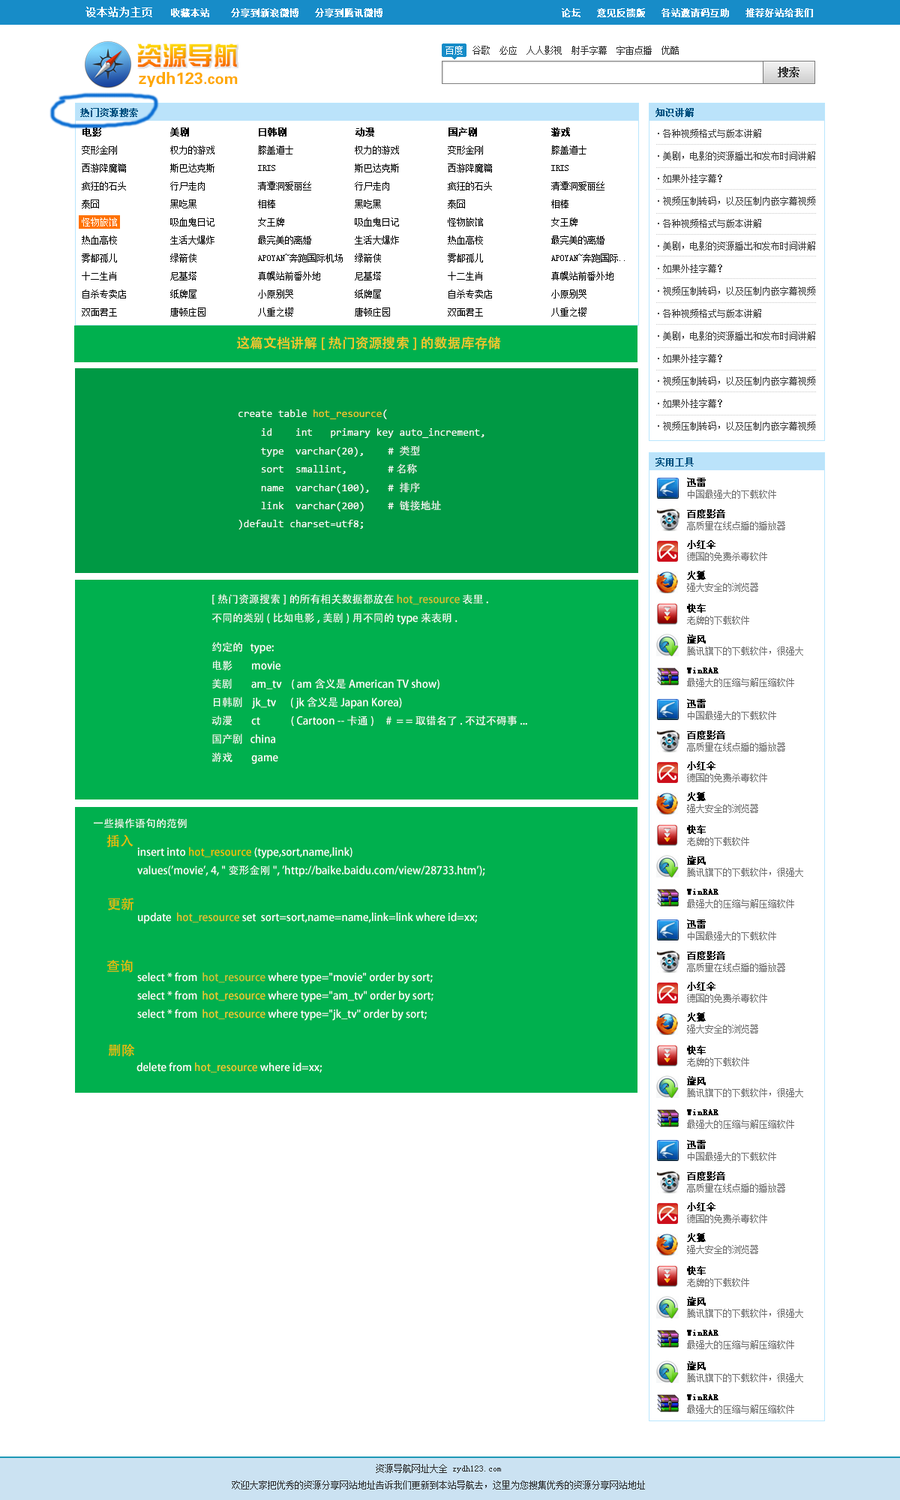
<style>
.page{position:relative;width:900px;height:1500px;background:#ffffff}
.page>*{position:absolute;margin:0}
.t1{font:9px "NSimSun";color:#ffffff;font-weight:bold}
.t2{font:10.5px "NSimSun";color:#ffffff;font-weight:bold}
.t3{font:25.5px "HYk1gj"}
.t4{font:9px "NSimSun";color:#2c2c2c}
.t5{font:9px "NSimSun";color:#ffffff}
.t6{font:16.5px "FZDHTJW--GB1-0";color:#ffa800}
.t7{font:15px "FZDHTJW--GB1-0";color:#ffa800}
.t8{font:10.5px "NSimSun";color:#2c2c2c;font-weight:bold}
.t9{font:9px "NSimSun";color:#005281;font-weight:bold}
.t10{font:9px "NSimSun";color:#010101;font-weight:bold}
.t11{font:9px/22.5px "NSimSun";color:#3d3d3d}
.t12{font:9px/18px "NSimSun";color:#010101}
.t13{font:9px/18px "NSimSun";color:#ffffff}
.t14{font:9px/18px "NSimSun";color:#000000}
.t15{font:9px/12px "NSimSun";color:#6e6e6e}
.t16{font:9px/12px "NSimSun";color:#010101;font-weight:bold}
.t17{font:10.5px "AdobeHeitiStd-Regular";color:#ffffff}
.t18{font:10.5px "AdobeHeitiStd-Regular";color:#dabe2f}
.t19{font:13.5px "AdobeHeitiStd-Regular";color:#f2bc00}
.t20{font:10.5px "AdobeHeitiStd-Regular";color:#f2bc00}
.t21{font:10.5px "AdobeHeitiStd-Regular";color:#e5c12d}
.t22{font:10.5px "AdobeHeitiStd-Regular";color:#fefefe}
.t23{font:10.5px "AdobeHeitiStd-Regular";color:#d0c432}
.t24{font:10.5px "AdobeHeitiStd-Regular";color:#eec82a}
.t25{font:9px/16.5px "NSimSun";color:#2c2c2c}
</style>
<div class="page">
<p class="t1" style="left:86px;top:7px;width:727px;height:10px"><span class="t2">设本站为主页   </span>收藏本站    分享到新浪微博   分享到腾讯微博                                  论坛   意见反馈版   各站邀请码互助   推荐好站给我们</p>
<p class="t3" style="left:137px;top:44px;width:100px;height:24px">资源导航</p>
<p class="t4" style="left:446px;top:46px;width:233px;height:9px"><span class="t5">百度</span>  谷歌  必应  人人影视  射手字幕  宇宙点播  优酷</p>
<p class="t6" style="left:139px;top:72px;width:99px;height:15px">zydh123<span class="t7">.com</span></p>
<p class="t8" style="left:778px;top:67px;width:22px;height:10px">搜索</p>
<p class="t9" style="left:80px;top:108px;width:58px;height:9px">热门资源搜索</p>
<p class="t9" style="left:656px;top:108px;width:38px;height:9px">知识讲解</p>
<p class="t10" style="left:82px;top:128px;width:488px;height:8px">电影             美剧             日韩剧             动漫              国产剧              游戏</p>
<p class="t11" style="left:658px;top:129px;width:157px;height:301px">·各种视频格式与版本讲解<br>·美剧，电影的资源播出和发布时间讲解<br>·如果外挂字幕？<br>·视频压制转码，以及压制内嵌字幕视频<br>·各种视频格式与版本讲解<br>·美剧，电影的资源播出和发布时间讲解<br>·如果外挂字幕？<br>·视频压制转码，以及压制内嵌字幕视频<br>·各种视频格式与版本讲解<br>·美剧，电影的资源播出和发布时间讲解<br>·如果外挂字幕？<br>·视频压制转码，以及压制内嵌字幕视频<br>·如果外挂字幕？<br>·视频压制转码，以及压制内嵌字幕视频</p>
<p class="t12" style="left:82px;top:146px;width:44px;height:170px">变形金刚<br>西游降魔篇<br>疯狂的石头<br>泰囧<br><span class="t13">怪物旅馆<br></span>热血高校<br>雾都孤儿<br>十二生肖<br>自杀专卖店<br>双面君王</p>
<p class="t14" style="left:170px;top:146px;width:44px;height:170px">权力的游戏<br>斯巴达克斯<br>行尸走肉<br>黑吃黑<br>吸血鬼日记<br>生活大爆炸<br>绿箭侠<br>尼基塔<br>纸牌屋<br>唐顿庄园</p>
<p class="t14" style="left:258px;top:146px;width:85px;height:170px">膝盖道士<br>IRIS<br>清潭洞爱丽丝<br>相棒<br>女王牌<br>最完美的离婚<br>APOYAN~奔跑国际机场<br>真幌站前番外地<br>小原别哭<br>八重之樱</p>
<p class="t14" style="left:355px;top:146px;width:44px;height:170px">权力的游戏<br>斯巴达克斯<br>行尸走肉<br>黑吃黑<br>吸血鬼日记<br>生活大爆炸<br>绿箭侠<br>尼基塔<br>纸牌屋<br>唐顿庄园</p>
<p class="t14" style="left:448px;top:146px;width:44px;height:170px">变形金刚<br>西游降魔篇<br>疯狂的石头<br>泰囧<br>怪物旅馆<br>热血高校<br>雾都孤儿<br>十二生肖<br>自杀专卖店<br>双面君王</p>
<p class="t14" style="left:551px;top:146px;width:74px;height:170px">膝盖道士<br>IRIS<br>清潭洞爱丽丝<br>相棒<br>女王牌<br>最完美的离婚<br>APOYAN~奔跑国际..<br>真幌站前番外地<br>小原别哭<br>八重之樱</p>
<p class="t9" style="left:656px;top:458px;width:38px;height:8px">实用工具</p>
<p class="t15" style="left:687px;top:478px;width:89px;height:21px"><span class="t16">迅雷<br></span>中国最强大的下载软件</p>
<p class="t15" style="left:687px;top:509px;width:98px;height:21px"><span class="t16">百度影音<br></span>高质量在线点播的播放器</p>
<p class="t15" style="left:687px;top:540px;width:80px;height:21px"><span class="t16">小红伞<br></span>德国的免费杀毒软件</p>
<p class="t15" style="left:687px;top:571px;width:71px;height:21px"><span class="t16">火狐<br></span>强大安全的浏览器</p>
<p class="t17" style="left:212px;top:594px;width:276px;height:31px">[热门资源搜索]的所有相关数据都放在 <span class="t18">hot_resource </span>表里.<br>不同的类别(比如电影,美剧)用不同的type来表明.</p>
<p class="t15" style="left:687px;top:604px;width:62px;height:21px"><span class="t16">快车<br></span>老牌的下载软件</p>
<p class="t15" style="left:687px;top:634px;width:116px;height:22px"><span class="t16">旋风<br></span>腾讯旗下的下载软件，很强大</p>
<p class="t17" style="left:212px;top:642px;width:315px;height:122px">约定的   type:<br>电影        movie    <br>美剧        am_tv    ( am含义是American TV show)<br>日韩剧    jk_tv      ( jk 含义是 Japan Korea)<br>动漫        ct             ( Cartoon --卡通)     #  = = 取错名了. 不过不碍事...<br>国产剧   china    <br>游戏        game</p>
<p class="t15" style="left:687px;top:668px;width:107px;height:19px"><span class="t16">WinRAR<br></span>最强大的压缩与解压缩软件</p>
<p class="t17" style="left:94px;top:818px;width:93px;height:11px">一些操作语句的范例</p>
<p class="t19" style="left:106px;top:835px;width:28px;height:13px">插入</p>
<p class="t17" style="left:137px;top:847px;width:348px;height:30px">insert into <span class="t20">hot_resource</span> (type,sort,name,link) <br>values('movie', 4, "变形金刚", 'http://baike.baidu.com/view/28733.htm');</p>
<p class="t19" style="left:108px;top:898px;width:26px;height:12px">更新</p>
<p class="t17" style="left:138px;top:912px;width:339px;height:12px">update  <span class="t21">hot_resource </span>set  sort=sort,name=name,link=link where id=xx;</p>
<p class="t19" style="left:106px;top:959px;width:27px;height:14px">查询</p>
<p class="t22" style="left:137px;top:972px;width:297px;height:49px">select * from  <span class="t23">hot_resource</span> where type="movie" order by sort;<br>select * from  <span class="t24">hot_resource</span> where type="am_tv" order by sort;<br>select * from  <span class="t24">hot_resource</span> where type="jk_tv" order by sort;</p>
<p class="t19" style="left:109px;top:1044px;width:26px;height:13px">删除</p>
<p class="t24" style="left:136px;top:1062px;width:186px;height:10px"><span class="t17">delete from </span>hot_resource<span class="t17"> where id=xx;</span></p>
<p class="t25" style="left:232px;top:1464px;width:413px;height:26px;text-align:center">资源导航网址大全 zydh123.com<br>欢迎大家把优秀的资源分享网站地址告诉我们更新到本站导航去，这里为您搜集优秀的资源分享网站地址</p>
</div>
